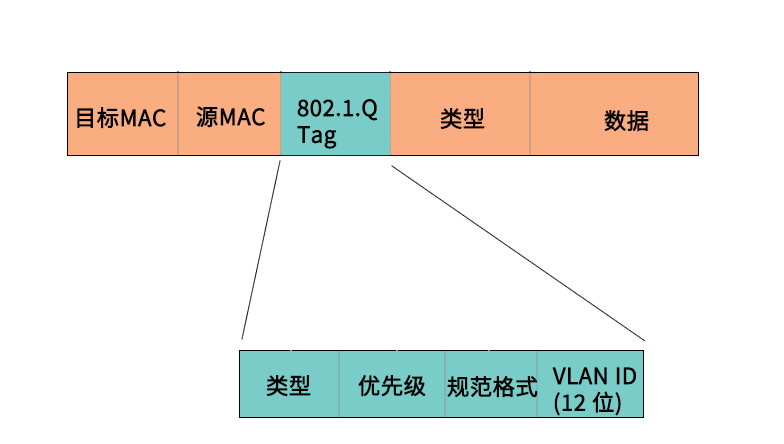
<style>
.page{position:relative;width:784px;height:444px;background:#ffffff}
.page>*{position:absolute;margin:0}
.t1{font:22.2px "SourceHanSansCN-Normal";color:#000000;font-weight:bold}
</style>
<div class="page">
<p class="t1" style="left:297px;top:99px;width:81px;height:50px">802.1.Q<br>Tag</p>
<p class="t1" style="left:77px;top:107px;width:89px;height:22px">目标MAC</p>
<p class="t1" style="left:196px;top:106px;width:69px;height:22px">源MAC</p>
<p class="t1" style="left:440px;top:108px;width:45px;height:22px">类型</p>
<p class="t1" style="left:604px;top:110px;width:45px;height:22px">数据</p>
<p class="t1" style="left:266px;top:375px;width:45px;height:22px">类型</p>
<p class="t1" style="left:358px;top:375px;width:68px;height:22px">优先级</p>
<p class="t1" style="left:447px;top:375px;width:91px;height:23px">规范格式</p>
<p class="t1" style="left:552px;top:367px;width:84px;height:49px">VLAN ID<br>(12 位)</p>
</div>
